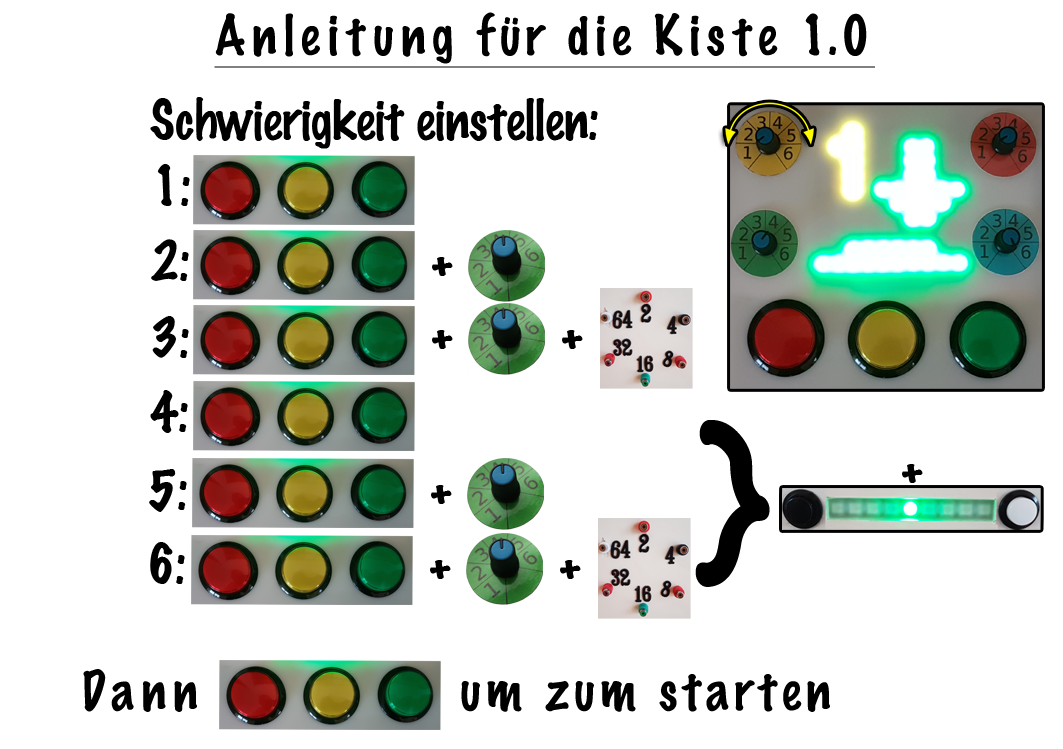
<style>
.page{position:relative;width:1063px;height:749px;background:#ffffff}
.page>*{position:absolute;margin:0}
.t1{font:50px "MarkerFelt-Thin";letter-spacing:0.105em;color:#000000;text-decoration:underline}
.t2{font:50px "MarkerFelt-Thin";color:#000000}
.t3{font:200px "MarkerFelt-Thin";color:#000000}
.t4{font:50px "MarkerFelt-Thin";letter-spacing:0.105em;color:#000000}
</style>
<div class="page">
<p class="t1" style="left:214px;top:12px;width:661px;height:56px">Anleitung für die Kiste 1.0</p>
<p class="t2" style="left:150px;top:97px;width:448px;height:52px">Schwierigkeit einstellen:</p>
<p class="t2" style="left:150px;top:390px;width:38px;height:43px">4:</p>
<p class="t3" style="left:695px;top:420px;width:75px;height:167px">}</p>
<p class="t2" style="left:149px;top:469px;width:38px;height:43px">5:</p>
<p class="t2" style="left:902px;top:464px;width:21px;height:19px">+</p>
<p class="t2" style="left:150px;top:542px;width:35px;height:42px">6:</p>
<p class="t4" style="left:83px;top:669px;width:114px;height:43px">Dann</p>
<p class="t4" style="left:461px;top:674px;width:369px;height:38px">um zum starten</p>
</div>
